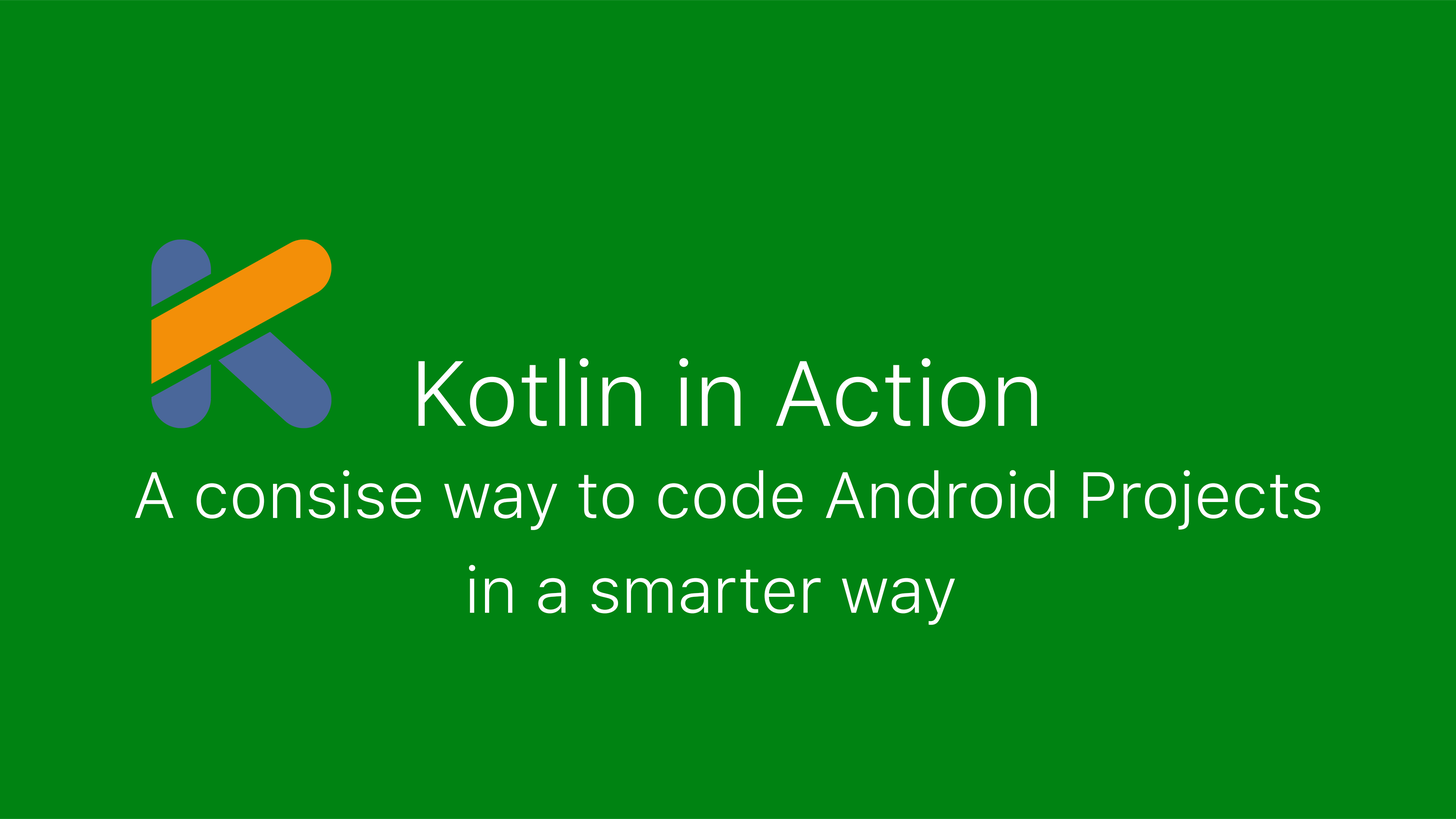
<style>
.page{position:relative;width:1456px;height:819px;background:#008312}
.page>*{position:absolute;margin:0}
.t1{font:91.6px "SFUIText-Light";color:#ffffff}
.t2{font:64.8px/47.4px "SFUIText-Light";color:#ffffff}
</style>
<div class="page">
<p class="t1" style="left:418px;top:358px;width:619px;height:69px">Kotlin in Action</p>
<p class="t2" style="left:135px;top:470px;width:1185px;height:155px;text-align:center">A consise way to code Android Projects<br><br>in a smarter way</p>
</div>
